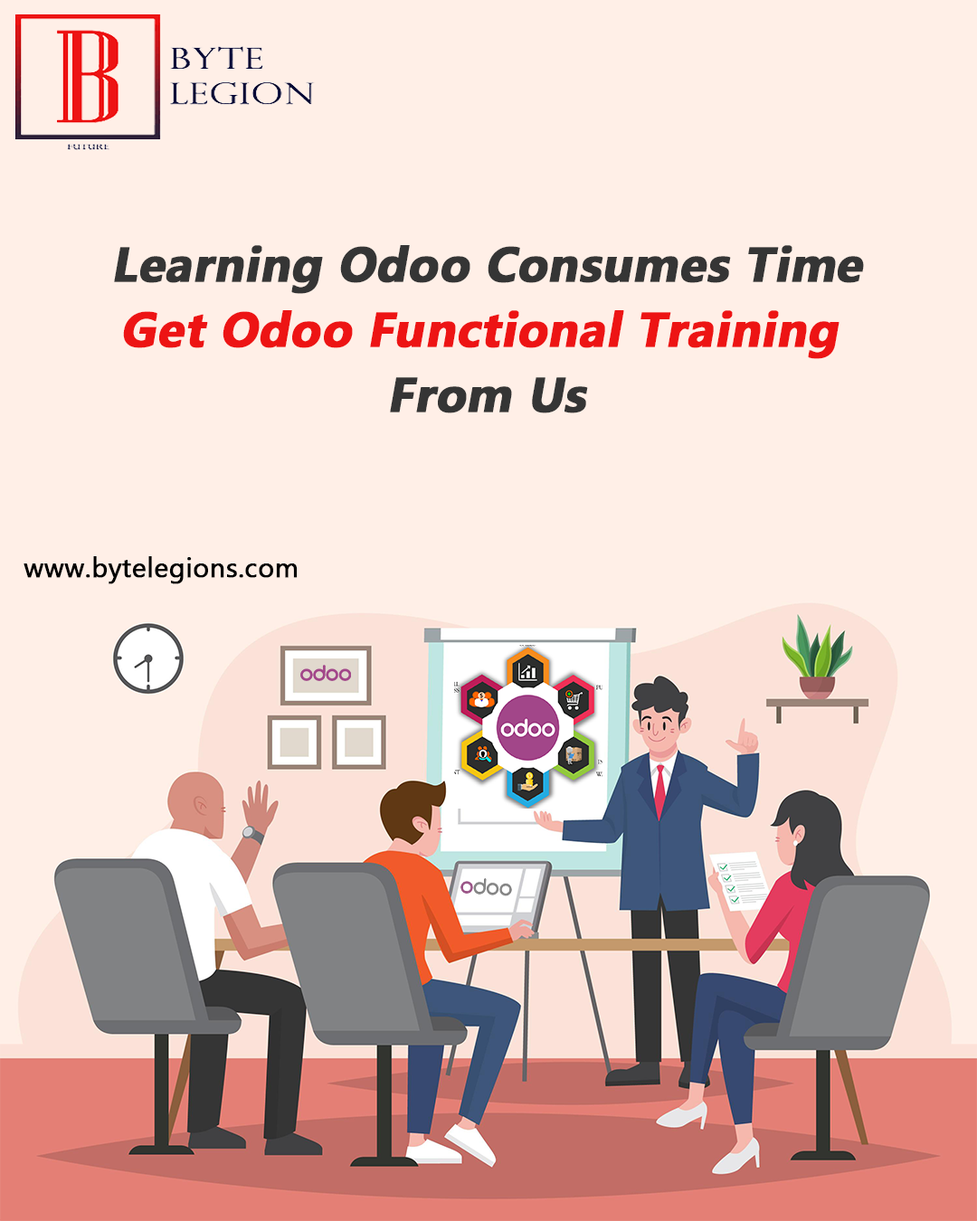
<style>
.page{position:relative;width:977px;height:1221px;background:#ffefe7}
.page>*{position:absolute;margin:0}
.t1{font:48.8px/65.1px "MicrosoftNewTaiLue-Bold";color:#ed1414;font-weight:bold;font-style:italic}
.t2{font:48.8px/65.1px "MicrosoftNewTaiLue-Bold";color:#353535;font-weight:bold;font-style:italic}
.t3{font:27.1px "MyanmarText";color:#000000;font-weight:bold}
</style>
<div class="page">
<p class="t1" style="left:114px;top:245px;width:750px;height:168px;text-align:center"><span class="t2">Learning Odoo Consumes Time<br></span>Get Odoo Functional Training <br><span class="t2">From Us</span></p>
<p class="t3" style="left:24px;top:556px;width:274px;height:28px">www.bytelegions.com</p>
</div>
